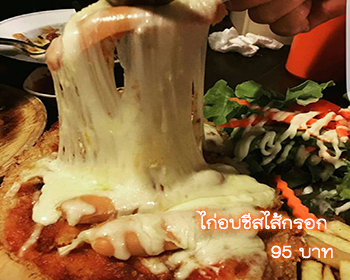
<style>
.page{position:relative;width:350px;height:280px}
.page>*{position:absolute;margin:0}
.t1{font:24px "THKodchasal";color:#ffffff}
</style>
<div class="page">
<p class="t1" style="left:196px;top:210px;width:137px;height:49px;text-align:right">ไก่อบชีสไส้กรอก<br>บาท 95</p>
</div>
